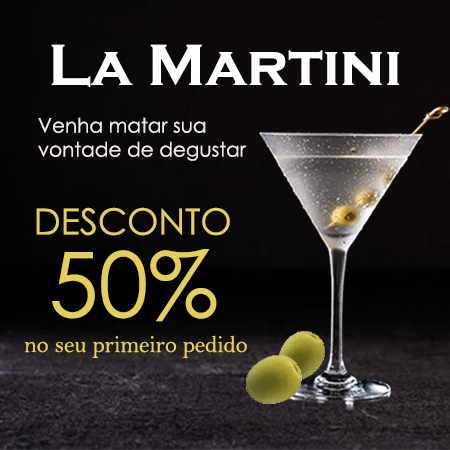
<style>
.page{position:relative;width:450px;height:450px}
.page>*{position:absolute;margin:0}
.t1{font:60px "CopperplateGothic-Bold";color:#ffffff}
.t2{font:20px "CenturyGothic";color:#f4eaea}
.t3{font:36px "CenturyGothic";color:#e4cf5d}
.t4{font:90px "CenturyGothic";color:#e4cf5d}
.t5{font:24px "BellMT";color:#e4cf5d}
</style>
<div class="page">
<p class="t1" style="left:51px;top:44px;width:348px;height:43px">La Martini</p>
<p class="t2" style="left:38px;top:117px;width:209px;height:44px">Venha matar sua vontade de degustar</p>
<p class="t3" style="left:36px;top:207px;width:194px;height:29px">DESCONTO</p>
<p class="t4" style="left:52px;top:249px;width:165px;height:73px">50%</p>
<p class="t5" style="left:24px;top:335px;width:223px;height:23px">no seu primeiro pedido</p>
</div>
